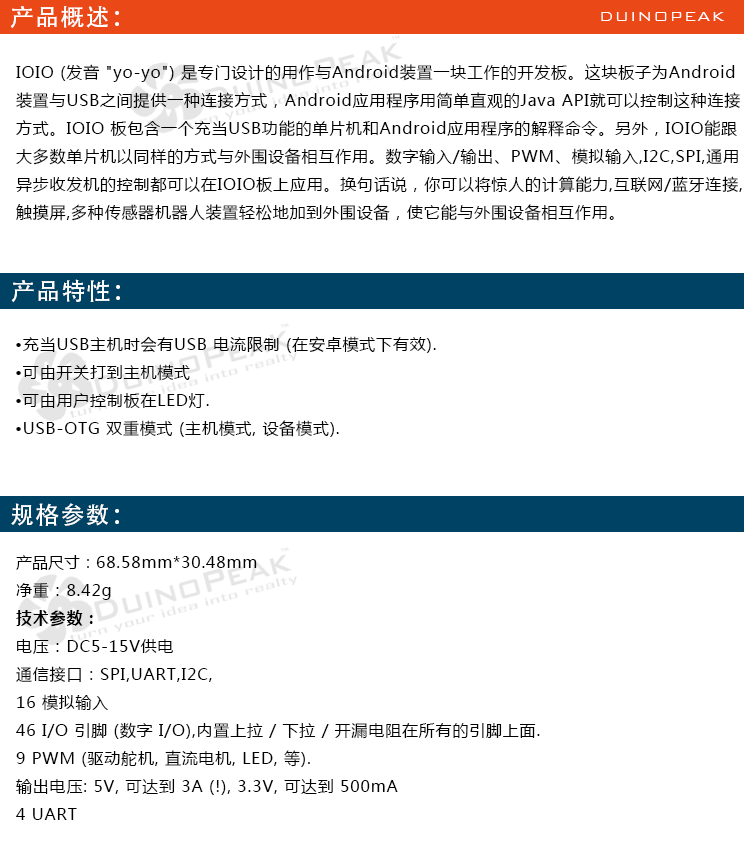
<style>
.page{position:relative;width:744px;height:850px;background:#ffffff}
.page>*{position:absolute;margin:0}
.t1{font:24px "AdobeHeitiStd-Regular";letter-spacing:0.05em;color:#ffffff}
.t2{font:18px "BankGothicBT-Light";letter-spacing:0.05em;color:#ffffff}
.t3{font:16px "MicrosoftYaHei";letter-spacing:0.05em;color:#000000}
.t4{font:16px "MicrosoftYaHei";color:#000000}
.t5{font:16px "MicrosoftYaHei-Bold";letter-spacing:0.05em;color:#000000}
</style>
<div class="page">
<p class="t1" style="left:10px;top:6px;width:109px;height:23px">产品概述：</p>
<p class="t2" style="left:601px;top:12px;width:124px;height:9px">DUINOPEAK</p>
<p class="t3" style="left:16px;top:64px;width:726px;height:157px">IOIO (发音 "yo-yo") 是专门设计的用作与Android装置一块工作的开发板。这块板子为Android<br>装置与USB之间提供一种连接方式，Android应用程序用简单直观的Java API就可以控制这种连接<br>方式。IOIO 板包含一个充当USB功能的单片机和Android应用程序的解释命令。另外，IOIO能跟<br>大多数单片机以同样的方式与外围设备相互作用。数字输入/输出、PWM、模拟输入,I2C,SPI,通用<br>异步收发机的控制都可以在IOIO板上应用。换句话说，你可以将惊人的计算能力,互联网/蓝牙连接,<br>触摸屏,多种传感器机器人装置轻松地加到外围设备，使它能与外围设备相互作用。</p>
<p class="t1" style="left:11px;top:279px;width:109px;height:24px">产品特性：</p>
<p class="t3" style="left:16px;top:336px;width:420px;height:101px">•充当USB主机时会有USB 电流限制 (在安卓模式下有效).<br>•可由开关打到主机模式<br>•可由用户控制板在LED灯.<br>•USB-OTG 双重模式 (主机模式, 设备模式).</p>
<p class="t1" style="left:11px;top:503px;width:108px;height:23px">规格参数：</p>
<p class="t3" style="left:16px;top:555px;width:524px;height:265px"><span class="t4">产品尺寸：</span>68.58mm*30.48mm<br>净重：8.42g<br><span class="t5">技术参数：<br></span>电压：DC5-15V供电<br>通信接口：SPI,UART,I2C,<br>16 模拟输入<br>46 I/O 引脚 (数字 I/O),内置上拉 / 下拉 / 开漏电阻在所有的引脚上面.<br>9 PWM (驱动舵机, 直流电机, LED, 等).<br>输出电压: 5V, 可达到 3A (!), 3.3V, 可达到 500mA<br>4 UART</p>
</div>
